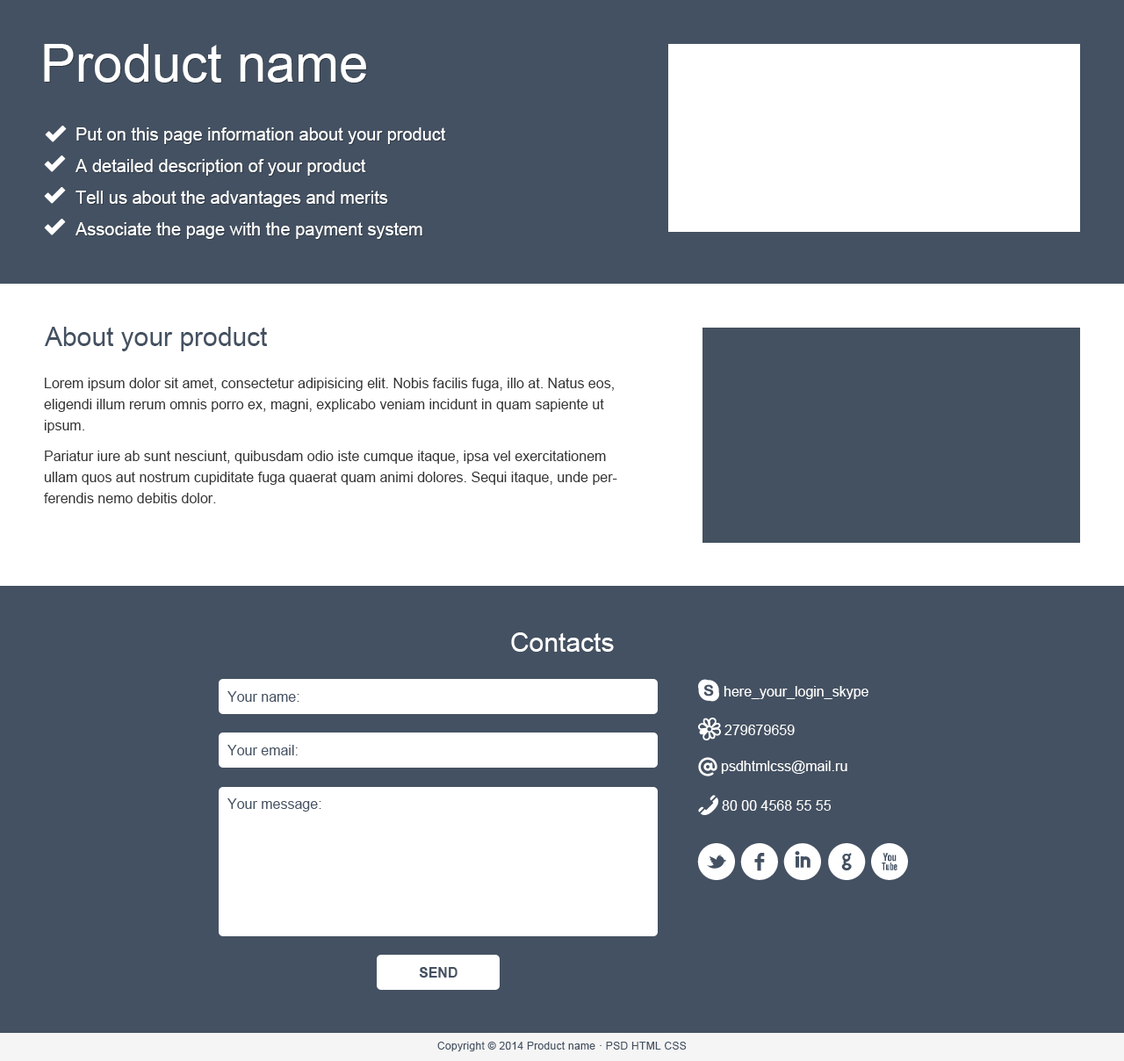
<style>
.page{position:relative;width:1124px;height:1061px;background:#445162}
.page>*{position:absolute;margin:0}
.t1{font:52.7px "ArialMT";color:#ffffff}
.t2{font:17.6px/31.6px "ArialMT";color:#ffffff}
.t3{font:26.3px "ArialMT";color:#445161}
.t4{font:14.1px/21.1px "ArialMT";color:#333333}
.t5{font:26.3px "ArialMT";color:#ffffff}
.t6{font:14.1px "ArialMT";color:#ffffff}
.t7{font:14.1px "ArialMT";color:#445162}
.t8{font:52.7px "Socialico";letter-spacing:0.025em;color:#ffffff}
.t9{font:14.1px "Arial-BoldMT";color:#445162;text-transform:uppercase}
.t10{font:10.5px "ArialMT";letter-spacing:0.025em;color:#445162}
</style>
<div class="page">
<p class="t1" style="left:44px;top:44px;width:322px;height:39px">Product name</p>
<p class="t2" style="left:76px;top:127px;width:370px;height:112px">Put on this page information about your product<br>A detailed description of your product<br>Tell us about the advantages and merits<br>Associate the page with the payment system</p>
<p class="t3" style="left:44px;top:327px;width:223px;height:24px">About your product</p>
<p class="t4" style="left:44px;top:378px;width:570px;height:55px">Lorem ipsum dolor sit amet, consectetur adipisicing elit. Nobis facilis fuga, illo at. Natus eos, eligendi illum rerum omnis porro ex, magni, explicabo veniam incidunt in quam sapiente ut ipsum.</p>
<p class="t4" style="left:44px;top:451px;width:573px;height:52px">Pariatur iure ab sunt nesciunt, quibusdam odio iste cumque itaque, ipsa vel exercitationem ullam quos aut nostrum cupiditate fuga quaerat quam animi dolores. Sequi itaque, unde perferendis nemo debitis dolor.</p>
<p class="t5" style="left:511px;top:632px;width:103px;height:20px">Contacts</p>
<p class="t6" style="left:724px;top:686px;width:145px;height:13px">here_your_login_skype</p>
<p class="t7" style="left:227px;top:691px;width:72px;height:11px">Your name:</p>
<p class="t6" style="left:724px;top:724px;width:71px;height:11px">279679659</p>
<p class="t7" style="left:227px;top:745px;width:71px;height:10px">Your email:</p>
<p class="t6" style="left:721px;top:760px;width:126px;height:14px">psdhtmlcss@mail.ru</p>
<p class="t7" style="left:227px;top:798px;width:94px;height:13px">Your message:</p>
<p class="t6" style="left:722px;top:800px;width:109px;height:11px">80 00 4568 55 55</p>
<p class="t8" style="left:697px;top:843px;width:211px;height:37px">lfigx</p>
<p class="t9" style="left:419px;top:967px;width:39px;height:10px">Send</p>
<p class="t10" style="left:437px;top:1042px;width:250px;height:9px">Copyright © 2014 Product name · PSD HTML CSS</p>
</div>
